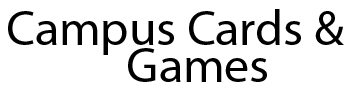
<style>
.page{position:relative;width:349px;height:90px;background:#ffffff}
.page>*{position:absolute;margin:0}
.t1{font:49.4px/37px "MyriadPro-Regular";color:#000000}
</style>
<div class="page">
<p class="t1" style="left:8px;top:9px;width:336px;height:73px">Campus Cards &amp; <br>  Games</p>
</div>
